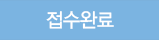
<style>
.page{position:relative;width:159px;height:40px;background:#7bb4e1}
.page>*{position:absolute;margin:0}
.t1{font:20px "YDVYGO33";letter-spacing:-0.025em;color:#ffffff;scale:0.95 1}
</style>
<div class="page">
<p class="t1" style="left:46px;top:11px;width:68px;height:18px">접수완료</p>
</div>
